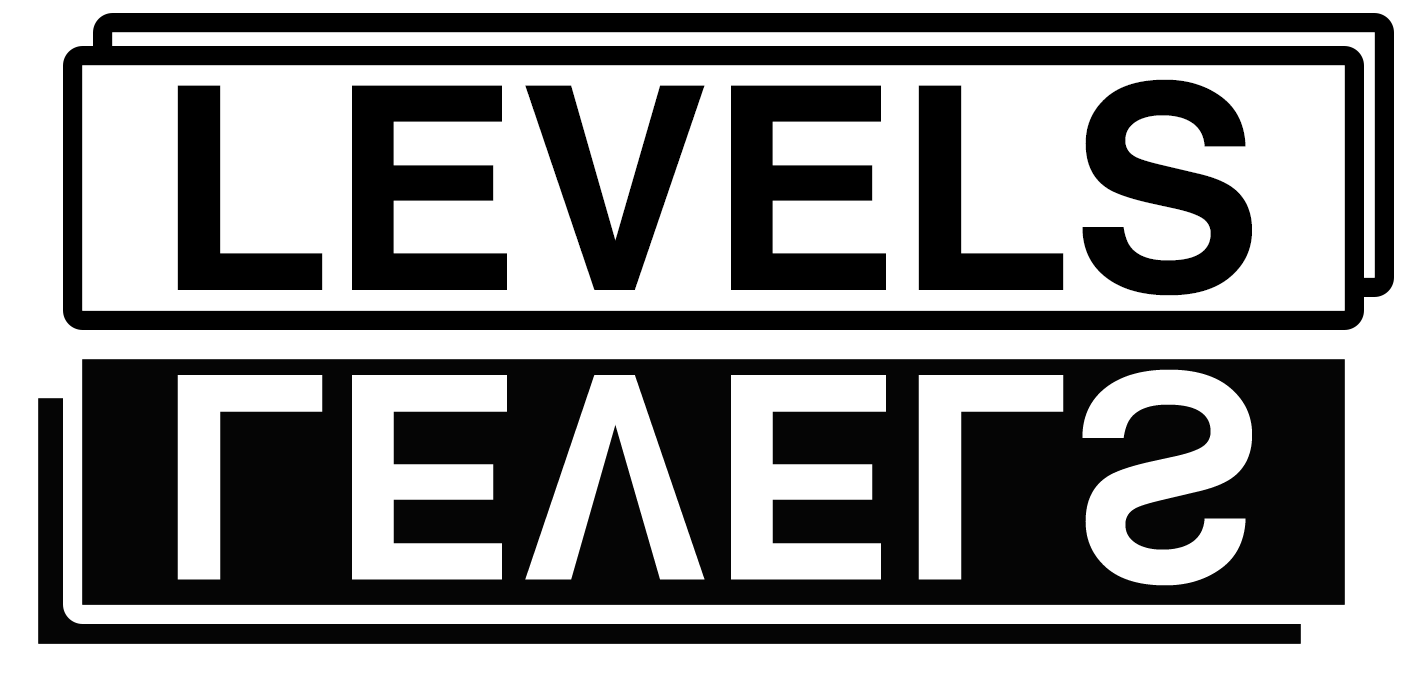
<style>
.page{position:relative;width:1404px;height:687px;background:#ffffff}
.page>*{position:absolute;margin:0}
.t1{font:284px "Helvetica-Bold";color:#000000}
</style>
<div class="page">
<p class="t1" style="left:177px;top:79px;width:1075px;height:217px">LEVELS</p>
</div>
